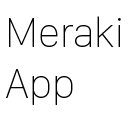
<style>
.page{position:relative;width:128px;height:128px;background:#ffffff}
.page>*{position:absolute;margin:0}
.t1{font:43px "SanFranciscoDisplay-Ultralight";color:#000000}
</style>
<div class="page">
<p class="t1" style="left:6px;top:16px;width:115px;height:89px">Meraki<br>App</p>
</div>
